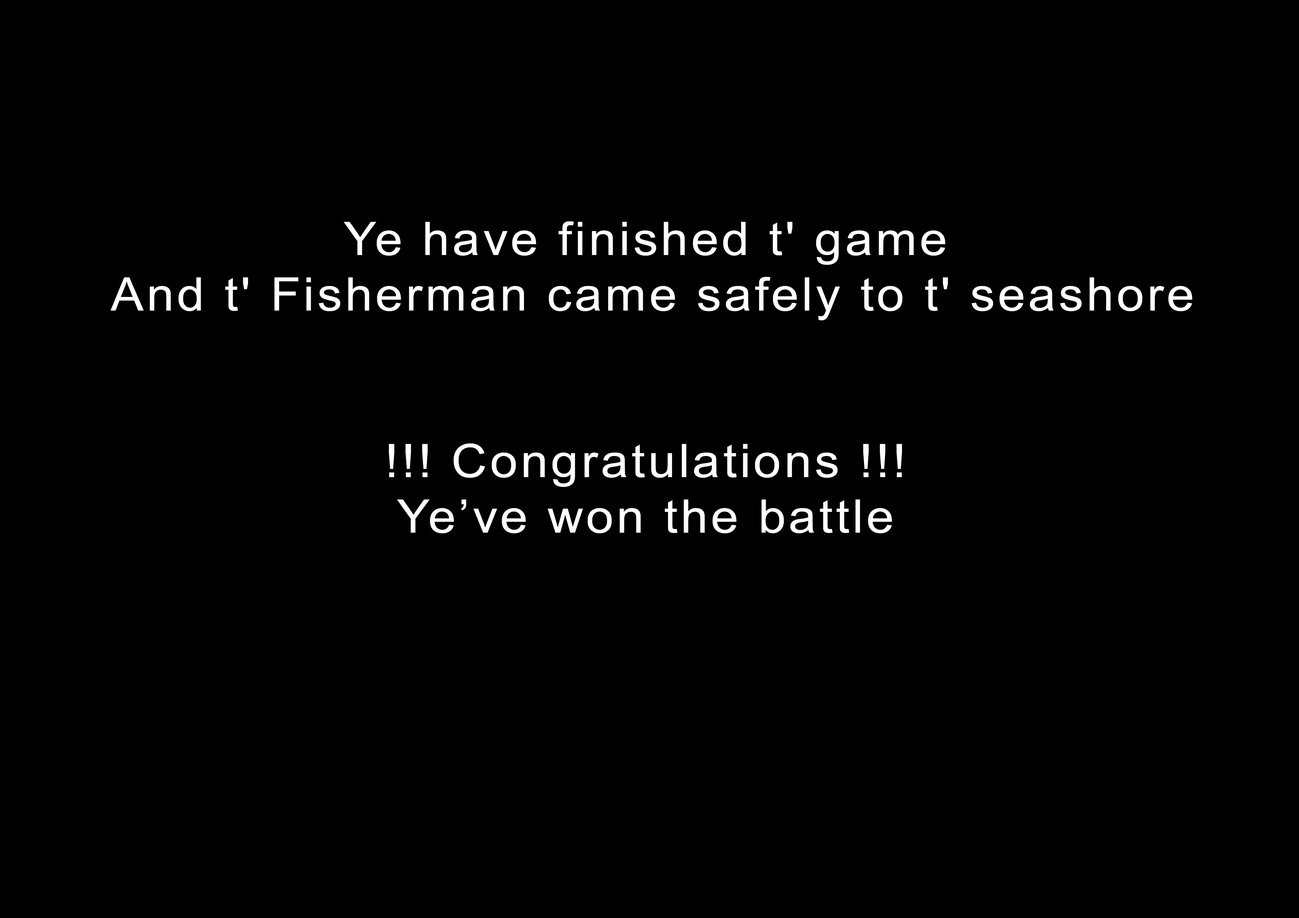
<style>
.page{position:relative;width:1299px;height:918px;background:#000000}
.page>*{position:absolute;margin:0}
.t1{font:46.3px "ArialNarrow";letter-spacing:0.05em;color:#ffffff;scale:1.3 1}
</style>
<div class="page">
<p class="t1" style="left:110px;top:221px;width:1082px;height:312px;text-align:center">Ye have finished t' game<br> And t' Fisherman came safely to t' seashore <br><br><br>!!! Congratulations !!!<br>Ye’ve won the battle</p>
</div>
